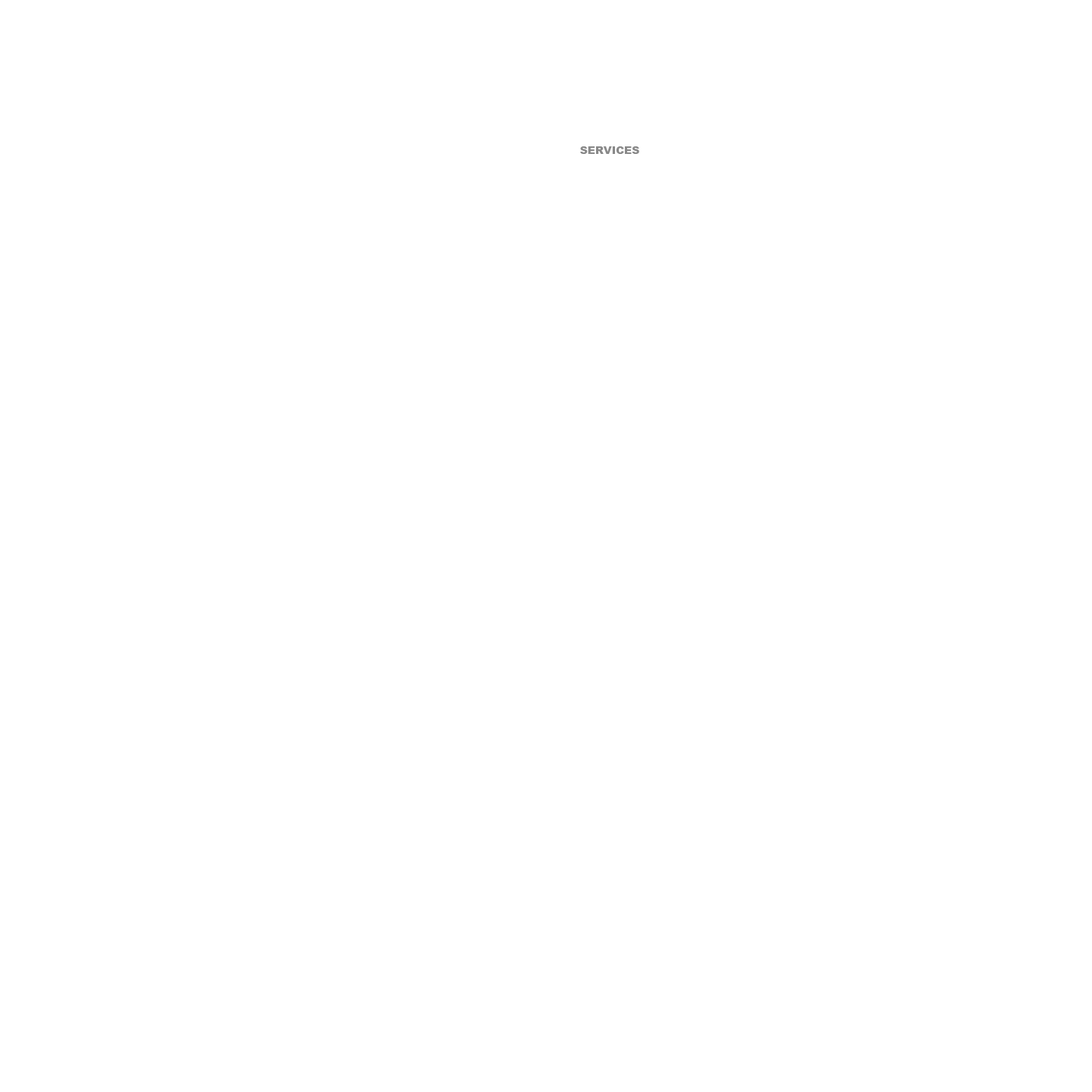
<style>
.page{position:relative;width:1092px;height:1092px;background:#ffffff}
.page>*{position:absolute;margin:0}
.t1{font:10.6px "Arial-Black";color:#898989}
</style>
<div class="page">
<p class="t1" style="left:580px;top:146px;width:59px;height:8px">SERVICES</p>
</div>
